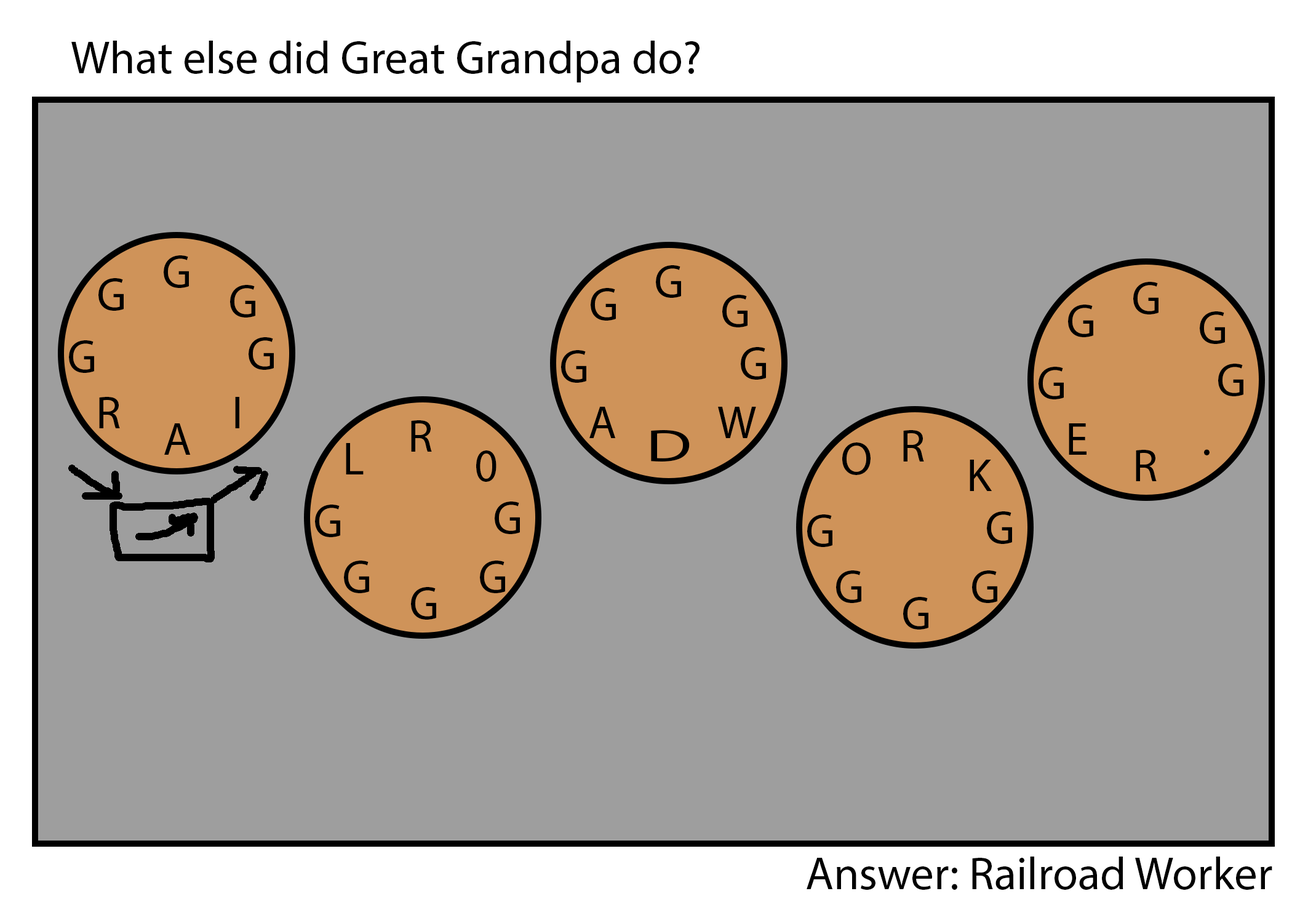
<style>
.page{position:relative;width:1292px;height:923px;background:#9e9e9e}
.page>*{position:absolute;margin:0}
.t1{font:46.1px "MyriadPro-Regular";color:#000000}
.t2{font:46.1px "MyriadPro-Regular";color:#000000;scale:1.49 1}
</style>
<div class="page">
<p class="t1" style="left:71px;top:41px;width:629px;height:41px">What else did Great Grandpa do?</p>
<p class="t1" style="left:164px;top:255px;width:25px;height:33px">G</p>
<p class="t1" style="left:656px;top:265px;width:25px;height:33px">G</p>
<p class="t1" style="left:98px;top:278px;width:26px;height:33px">G</p>
<p class="t1" style="left:1133px;top:282px;width:26px;height:32px">G</p>
<p class="t1" style="left:230px;top:285px;width:25px;height:32px">G</p>
<p class="t1" style="left:591px;top:288px;width:25px;height:33px">G</p>
<p class="t1" style="left:722px;top:295px;width:26px;height:32px">G</p>
<p class="t1" style="left:1068px;top:305px;width:25px;height:32px">G</p>
<p class="t1" style="left:1200px;top:311px;width:25px;height:33px">G</p>
<p class="t1" style="left:69px;top:340px;width:25px;height:33px">G</p>
<p class="t1" style="left:249px;top:337px;width:25px;height:33px">G</p>
<p class="t1" style="left:561px;top:350px;width:25px;height:33px">G</p>
<p class="t1" style="left:741px;top:347px;width:25px;height:33px">G</p>
<p class="t1" style="left:1218px;top:364px;width:25px;height:32px">G</p>
<p class="t1" style="left:1039px;top:367px;width:25px;height:32px">G</p>
<p class="t1" style="left:99px;top:397px;width:21px;height:31px">R</p>
<p class="t1" style="left:235px;top:397px;width:4px;height:31px">I</p>
<p class="t1" style="left:589px;top:407px;width:27px;height:31px">AA</p>
<p class="t1" style="left:718px;top:407px;width:38px;height:31px">W</p>
<p class="t1" style="left:164px;top:423px;width:27px;height:32px">A</p>
<p class="t1" style="left:411px;top:420px;width:21px;height:32px">R</p>
<p class="t1" style="left:1069px;top:423px;width:18px;height:32px">E</p>
<p class="t2" style="left:651px;top:430px;width:39px;height:31px">D</p>
<p class="t1" style="left:903px;top:430px;width:21px;height:31px">R</p>
<p class="t1" style="left:346px;top:443px;width:18px;height:31px">L</p>
<p class="t1" style="left:842px;top:442px;width:29px;height:33px">O</p>
<p class="t1" style="left:1136px;top:450px;width:21px;height:31px">R</p>
<p class="t1" style="left:1204px;top:449px;width:6px;height:6px">.</p>
<p class="t1" style="left:476px;top:450px;width:21px;height:32px">0</p>
<p class="t1" style="left:970px;top:460px;width:22px;height:31px">K</p>
<p class="t1" style="left:315px;top:505px;width:25px;height:32px">G</p>
<p class="t1" style="left:495px;top:501px;width:25px;height:33px">G</p>
<p class="t1" style="left:807px;top:514px;width:25px;height:33px">G</p>
<p class="t1" style="left:987px;top:511px;width:25px;height:33px">G</p>
<p class="t1" style="left:344px;top:561px;width:25px;height:32px">G</p>
<p class="t1" style="left:480px;top:561px;width:25px;height:32px">G</p>
<p class="t1" style="left:836px;top:570px;width:25px;height:33px">G</p>
<p class="t1" style="left:972px;top:570px;width:25px;height:33px">G</p>
<p class="t1" style="left:411px;top:587px;width:25px;height:33px">G</p>
<p class="t1" style="left:903px;top:597px;width:25px;height:32px">G</p>
<p class="t1" style="left:807px;top:856px;width:465px;height:34px">Answer: Railroad Worker</p>
</div>
